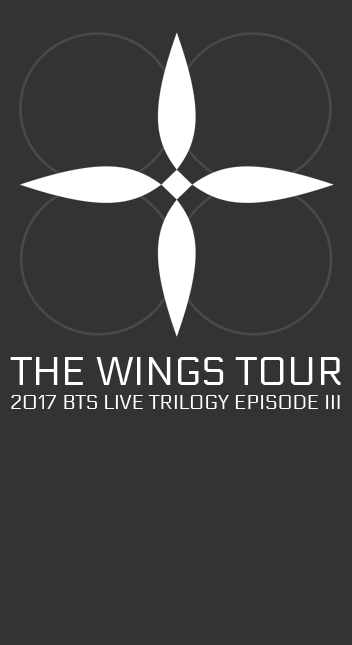
<style>
.page{position:relative;width:352px;height:645px;background:#333333}
.page>*{position:absolute;margin:0}
.t1{font:40px "Electrolize-Regular";color:#ffffff}
.t2{font:20px "Electrolize-Regular";color:#ffffff}
</style>
<div class="page">
<p class="t1" style="left:10px;top:357px;width:331px;height:28px">THE WINGS TOUR</p>
<p class="t2" style="left:11px;top:395px;width:329px;height:14px">2017 BTS LIVE TRILOGY EPISODE III</p>
</div>
